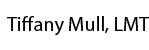
<style>
.page{position:relative;width:149px;height:50px;background:#ffffff}
.page>*{position:absolute;margin:0}
.t1{font:20.3px "MyriadPro-Regular";color:#000000}
</style>
<div class="page">
<p class="t1" style="left:7px;top:16px;width:143px;height:20px">Tiffany Mull, LMT</p>
</div>
